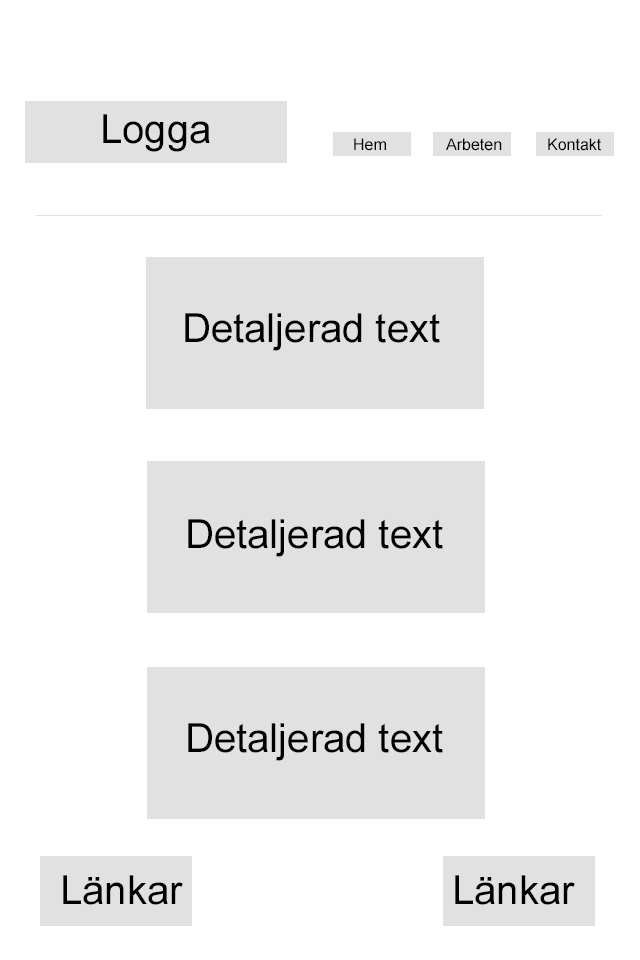
<style>
.page{position:relative;width:640px;height:960px;background:#ffffff}
.page>*{position:absolute;margin:0}
.t1{font:40px "ArialMT";color:#000000}
.t2{font:16px "ArialMT";color:#000000}
</style>
<div class="page">
<p class="t1" style="left:103px;top:114px;width:107px;height:38px">Logga</p>
<p class="t2" style="left:354px;top:138px;width:32px;height:13px">Hem</p>
<p class="t2" style="left:446px;top:138px;width:56px;height:13px">Arbeten</p>
<p class="t2" style="left:548px;top:138px;width:53px;height:13px">Kontakt</p>
<p class="t1" style="left:185px;top:313px;width:255px;height:38px">Detaljerad text</p>
<p class="t1" style="left:188px;top:519px;width:255px;height:38px">Detaljerad text</p>
<p class="t1" style="left:188px;top:723px;width:255px;height:38px">Detaljerad text</p>
<p class="t1" style="left:63px;top:875px;width:120px;height:30px">Länkar</p>
<p class="t1" style="left:455px;top:875px;width:120px;height:30px">Länkar</p>
</div>
